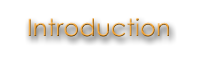
<style>
.page{position:relative;width:200px;height:60px;background:#ffffff}
.page>*{position:absolute;margin:0}
.t1{font:24px "CenturyGothic";letter-spacing:0.01em}
</style>
<div class="page">
<p class="t1" style="left:28px;top:18px;width:141px;height:19px">Introduction</p>
</div>
